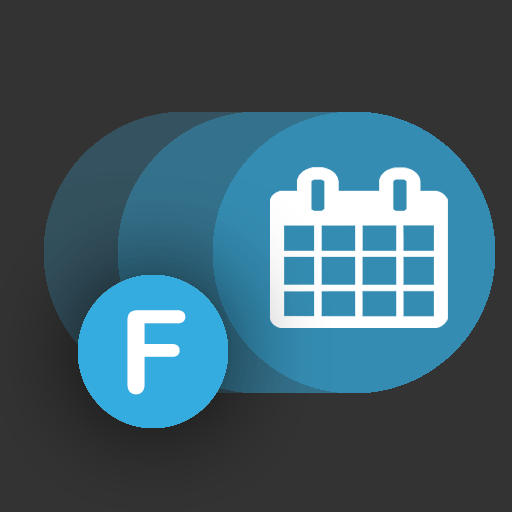
<style>
.page{position:relative;width:512px;height:512px;background:#333333}
.page>*{position:absolute;margin:0}
.t1{font:115px "ArialRoundedMTBold";color:#ffffff}
</style>
<div class="page">
<p class="t1" style="left:127px;top:310px;width:59px;height:85px">F</p>
</div>
